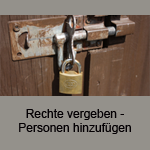
<style>
.page{position:relative;width:150px;height:150px;background:#94918b}
.page>*{position:absolute;margin:0}
.t1{font:12px "ArialMT";color:#040003}
</style>
<div class="page">
<p class="t1" style="left:19px;top:109px;width:112px;height:25px;text-align:center">Rechte vergeben -<br>Personen hinzufügen</p>
</div>
